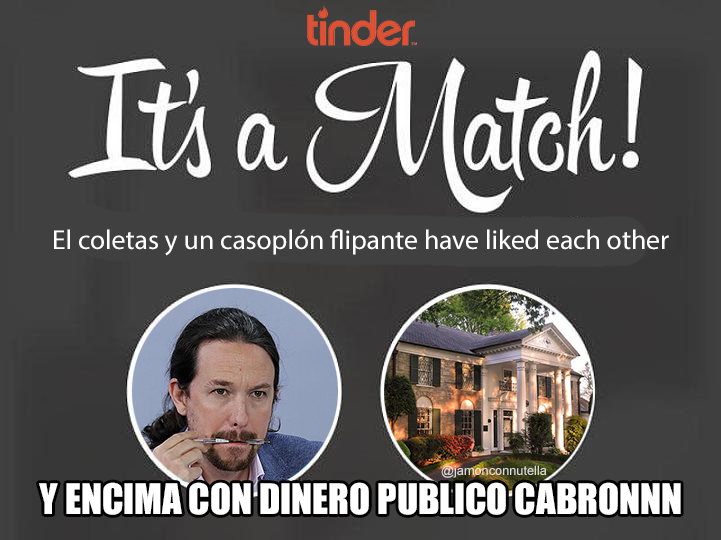
<style>
.page{position:relative;width:721px;height:540px;background:#404040}
.page>*{position:absolute;margin:0}
.t1{font:27.6px "MyriadPro-Regular";color:#ffffff}
.t2{font:12.8px "ArialMT";color:#dbdbd8}
.t3{font:38.7px "Impact";color:#ffffff}
</style>
<div class="page">
<p class="t1" style="left:54px;top:229px;width:615px;height:27px">El coletas y un casoplón flipante have liked each other</p>
<p class="t2" style="left:441px;top:465px;width:106px;height:13px">@jamonconnutella</p>
<p class="t3" style="left:39px;top:482px;width:642px;height:33px">Y ENCIMA CON DINERO PUBLICO CABRONNN</p>
</div>
